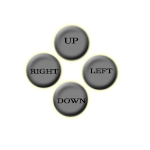
<style>
.page{position:relative;width:150px;height:150px;background:#ffffff}
.page>*{position:absolute;margin:0}
.t1{font:13.5px "JavaneseText";letter-spacing:-0.045em;color:#040404;font-weight:bold;scale:1.39 1}
.t2{font:11.2px "JavaneseText";letter-spacing:-0.045em;color:#040404;font-weight:bold;scale:1.39 1}
</style>
<div class="page">
<p class="t1" style="left:64px;top:37px;width:15px;height:7px">UP</p>
<p class="t2" style="left:30px;top:68px;width:29px;height:6px">RIGHT</p>
<p class="t2" style="left:90px;top:68px;width:23px;height:6px">LEFT</p>
<p class="t2" style="left:57px;top:98px;width:29px;height:6px">DOWN</p>
</div>
